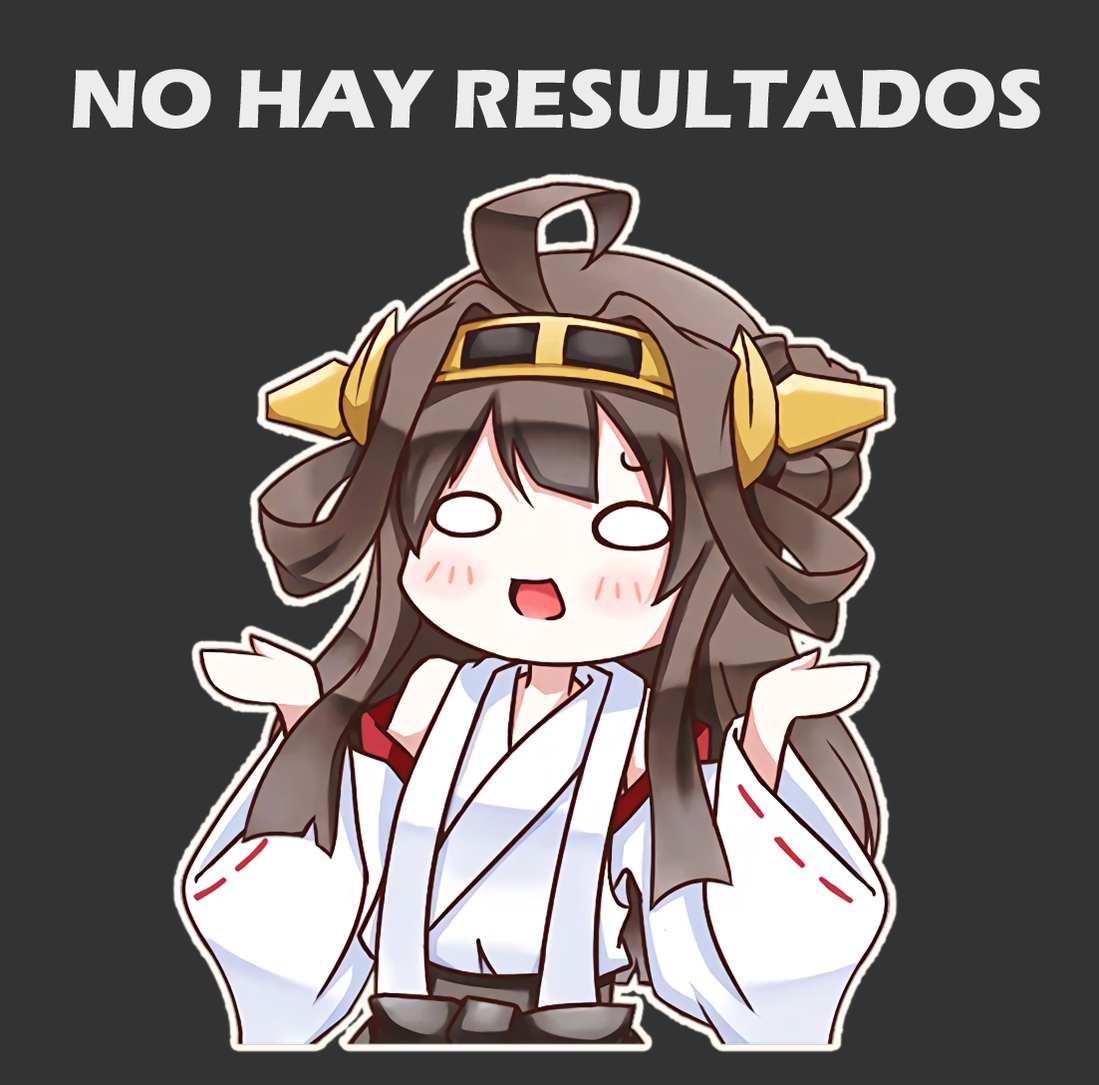
<style>
.page{position:relative;width:1099px;height:1085px;background:#333333}
.page>*{position:absolute;margin:0}
.t1{font:85.7px "ErasITC-Bold";color:#edeced}
</style>
<div class="page">
<p class="t1" style="left:73px;top:69px;width:968px;height:60px">NO HAY RESULTADOS</p>
</div>
